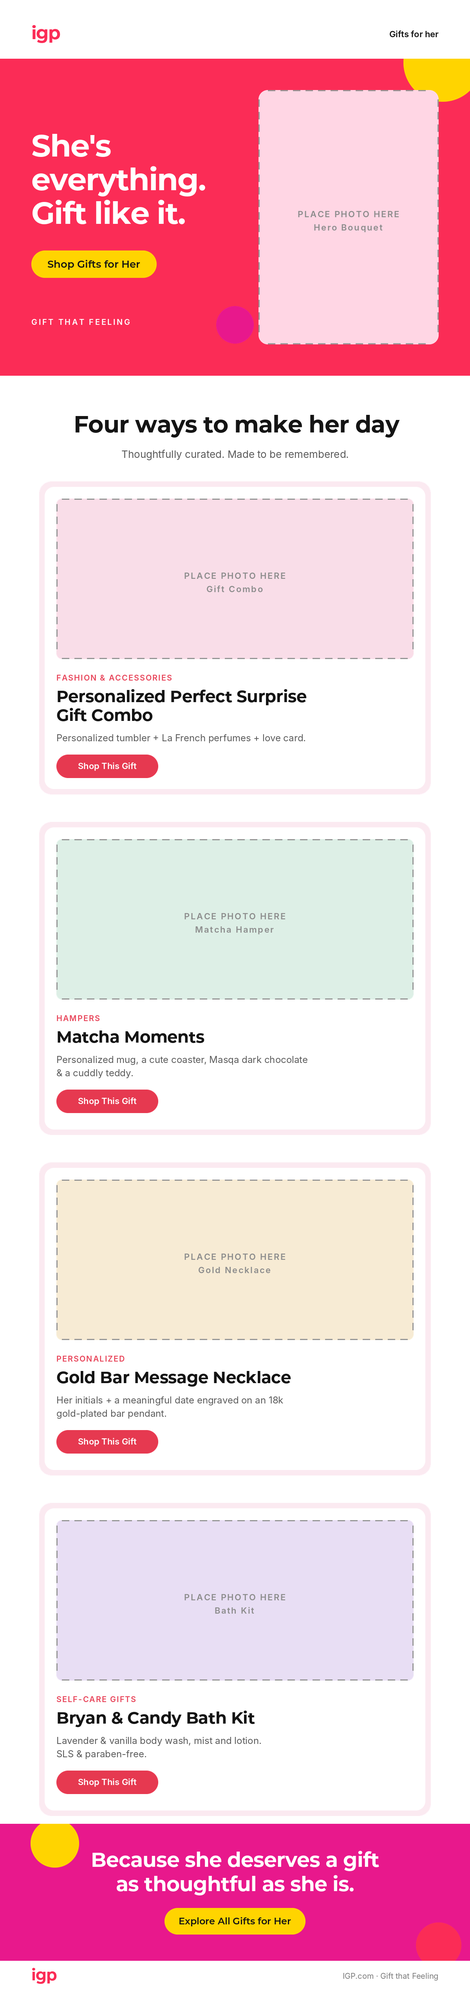
<style>
.page{position:relative;width:470px;height:1996px;background:#ffffff}
.page>*{position:absolute;margin:0}
.t1{font:18px "Montserrat-Bold";letter-spacing:-0.03em;color:#fb2c56}
.t2{font:8.6px "Inter-SemiBold";color:#141414}
.t3{font:30.5px/33.7px "Montserrat-Bold";letter-spacing:-0.025em;color:#ffffff}
.t4{font:8.6px/13.3px "Inter-SemiBold";letter-spacing:0.12em;color:#8c8c8c}
.t5{font:10.2px "Montserrat-SemiBold";color:#141414}
.t6{font:7.8px "Inter-SemiBold";letter-spacing:0.18em;color:#ffffff}
.t7{font:23.5px "Montserrat-Bold";letter-spacing:-0.015em;color:#141414}
.t8{font:10.2px "Inter-Regular";color:#5a5a5a}
.t9{font:7.8px "Inter-SemiBold";letter-spacing:0.1em;color:#e8455a}
.t10{font:16.4px/18.8px "Montserrat-Bold";letter-spacing:-0.01em;color:#141414}
.t11{font:9.4px "Inter-Regular";color:#5a5a5a}
.t12{font:8.6px "Inter-SemiBold";color:#ffffff}
.t13{font:16.4px "Montserrat-Bold";letter-spacing:-0.01em;color:#141414}
.t14{font:9.4px/13.3px "Inter-Regular";color:#5a5a5a}
.t15{font:20.3px/24.3px "Montserrat-Bold";letter-spacing:-0.015em;color:#ffffff}
.t16{font:9.4px "Montserrat-SemiBold";color:#141414}
.t17{font:15.7px "Montserrat-Bold";letter-spacing:-0.03em;color:#fb2c56}
.t18{font:7.8px "Inter-Regular";color:#7a7a7a}
</style>
<div class="page">
<p class="t1" style="left:32px;top:25px;width:28px;height:18px">igp</p>
<p class="t2" style="left:389px;top:31px;width:49px;height:6px">Gifts for her</p>
<p class="t3" style="left:32px;top:134px;width:173px;height:90px">She's<br>everything.<br>Gift like it.</p>
<p class="t4" style="left:298px;top:211px;width:101px;height:21px;text-align:center">PLACE PHOTO HERE<br>Hero Bouquet</p>
<p class="t5" style="left:47px;top:260px;width:93px;height:10px">Shop Gifts for Her</p>
<p class="t6" style="left:32px;top:319px;width:98px;height:6px">GIFT THAT FEELING</p>
<p class="t7" style="left:75px;top:415px;width:325px;height:22px">Four ways to make her day</p>
<p class="t8" style="left:122px;top:450px;width:226px;height:10px">Thoughtfully curated. Made to be remembered.</p>
<p class="t4" style="left:184px;top:572px;width:101px;height:20px;text-align:center">PLACE PHOTO HERE<br>Gift Combo</p>
<p class="t9" style="left:57px;top:675px;width:115px;height:5px">FASHION &amp; ACCESSORIES</p>
<p class="t10" style="left:57px;top:689px;width:249px;height:32px">Personalized Perfect Surprise<br>Gift Combo</p>
<p class="t11" style="left:57px;top:734px;width:248px;height:9px">Personalized tumbler + La French perfumes + love card.</p>
<p class="t12" style="left:78px;top:762px;width:59px;height:9px">Shop This Gift</p>
<p class="t4" style="left:184px;top:913px;width:101px;height:21px;text-align:center">PLACE PHOTO HERE<br>Matcha Hamper</p>
<p class="t9" style="left:57px;top:1015px;width:43px;height:6px">HAMPERS</p>
<p class="t13" style="left:58px;top:1030px;width:146px;height:13px">Matcha Moments</p>
<p class="t14" style="left:57px;top:1056px;width:250px;height:22px">Personalized mug, a cute coaster, Masqa dark chocolate<br>&amp; a cuddly teddy.</p>
<p class="t12" style="left:78px;top:1097px;width:59px;height:9px">Shop This Gift</p>
<p class="t4" style="left:184px;top:1253px;width:101px;height:20px;text-align:center">PLACE PHOTO HERE<br>Gold Necklace</p>
<p class="t9" style="left:57px;top:1355px;width:67px;height:6px">PERSONALIZED</p>
<p class="t13" style="left:57px;top:1371px;width:234px;height:15px">Gold Bar Message Necklace</p>
<p class="t14" style="left:57px;top:1396px;width:226px;height:22px">Her initials + a meaningful date engraved on an 18k<br>gold-plated bar pendant.</p>
<p class="t12" style="left:78px;top:1438px;width:59px;height:8px">Shop This Gift</p>
<p class="t4" style="left:184px;top:1594px;width:101px;height:19px;text-align:center">PLACE PHOTO HERE<br>Bath Kit</p>
<p class="t9" style="left:56px;top:1696px;width:80px;height:6px">SELF-CARE GIFTS</p>
<p class="t13" style="left:58px;top:1710px;width:197px;height:17px">Bryan &amp; Candy Bath Kit</p>
<p class="t14" style="left:57px;top:1737px;width:204px;height:22px">Lavender &amp; vanilla body wash, mist and lotion.<br>SLS &amp; paraben-free.</p>
<p class="t12" style="left:78px;top:1778px;width:59px;height:9px">Shop This Gift</p>
<p class="t15" style="left:92px;top:1850px;width:287px;height:45px;text-align:center">Because she deserves a gift<br>as thoughtful as she is.</p>
<p class="t16" style="left:179px;top:1917px;width:112px;height:9px">Explore All Gifts for Her</p>
<p class="t17" style="left:32px;top:1967px;width:25px;height:17px">igp</p>
<p class="t18" style="left:343px;top:1972px;width:94px;height:8px">IGP.com · Gift that Feeling</p>
</div>
